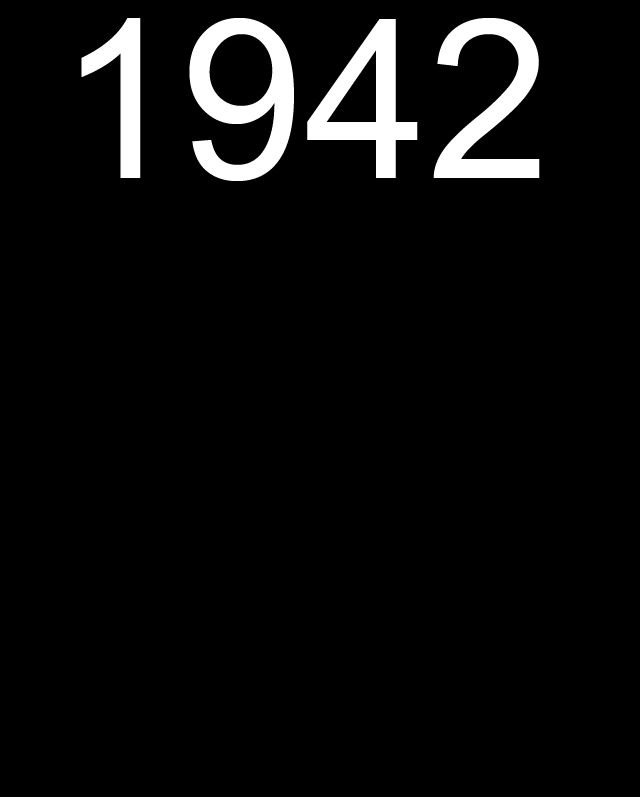
<style>
.page{position:relative;width:640px;height:800px;background:#000000}
.page>*{position:absolute;margin:0}
.t1{font:222px "DokChampa";color:#ffffff}
</style>
<div class="page">
<p class="t1" style="left:81px;top:18px;width:459px;height:163px">1942</p>
</div>
